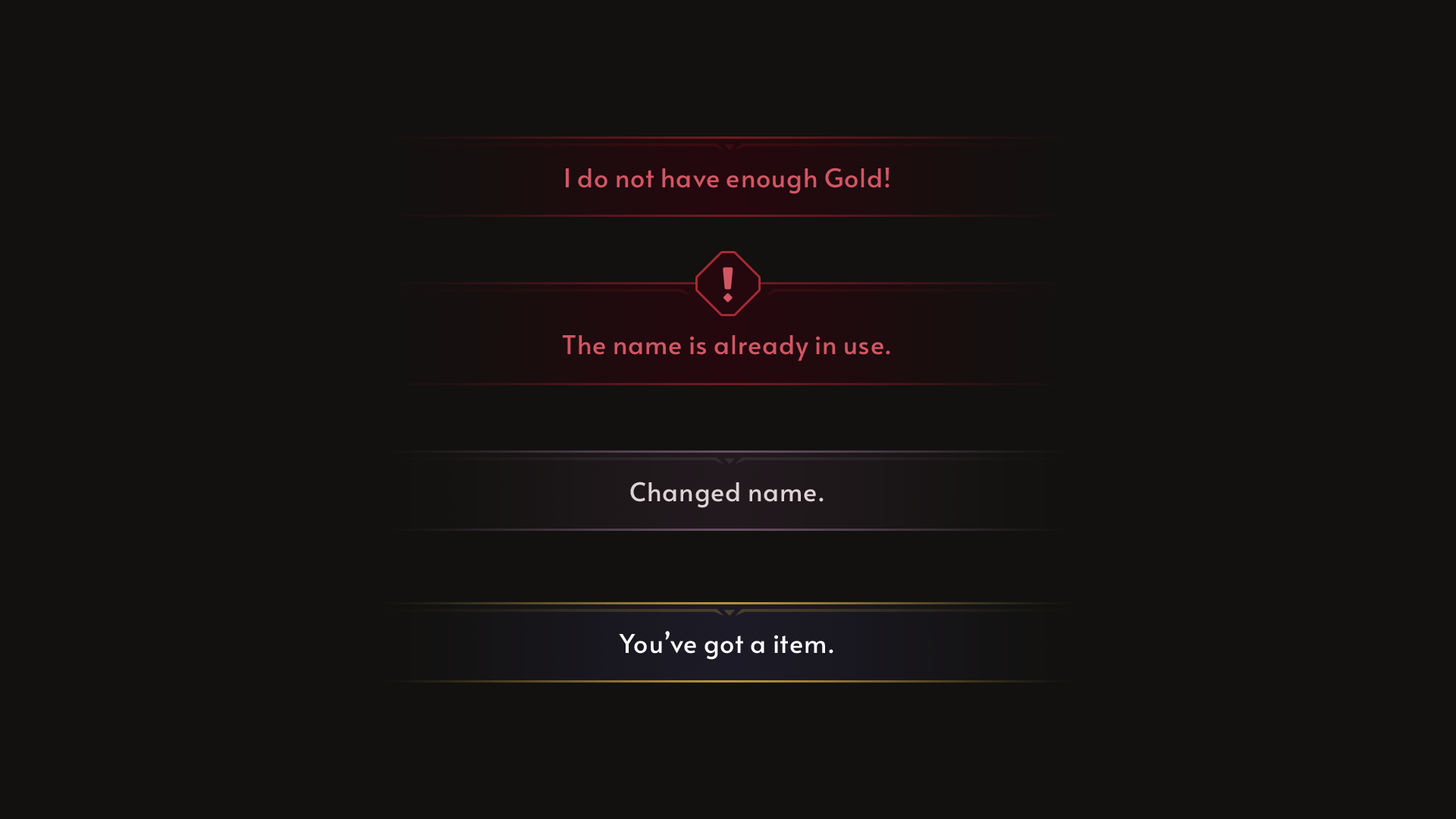
<style>
.page{position:relative;width:1456px;height:819px;background:#12110f}
.page>*{position:absolute;margin:0}
.t1{font:25.8px "Alata-Regular";color:#d25664}
.t2{font:25.8px "Alata-Regular";color:#ddd3d5}
.t3{font:25.8px "Alata-Regular";color:#ffffff}
</style>
<div class="page">
<p class="t1" style="left:566px;top:168px;width:324px;height:26px">I do not have enough Gold!</p>
<p class="t1" style="left:563px;top:335px;width:327px;height:26px">The name is already in use.</p>
<p class="t2" style="left:630px;top:482px;width:194px;height:26px">Changed name.</p>
<p class="t3" style="left:619px;top:631px;width:214px;height:29px">You’ve got a item.</p>
</div>
